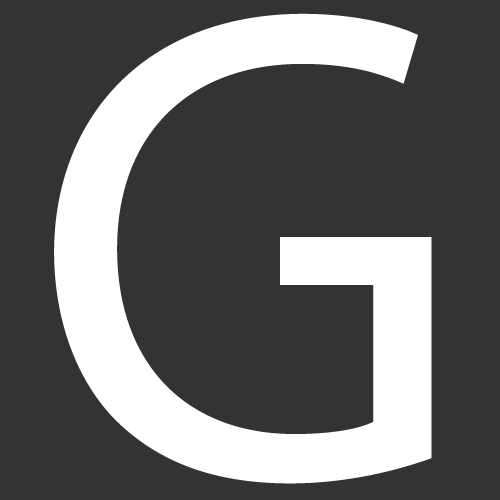
<style>
.page{position:relative;width:500px;height:500px;background:#333333}
.page>*{position:absolute;margin:0}
.t1{font:682.2px "MyriadPro-Regular";color:#ffffff}
</style>
<div class="page">
<p class="t1" style="left:54px;top:13px;width:378px;height:471px">G</p>
</div>
